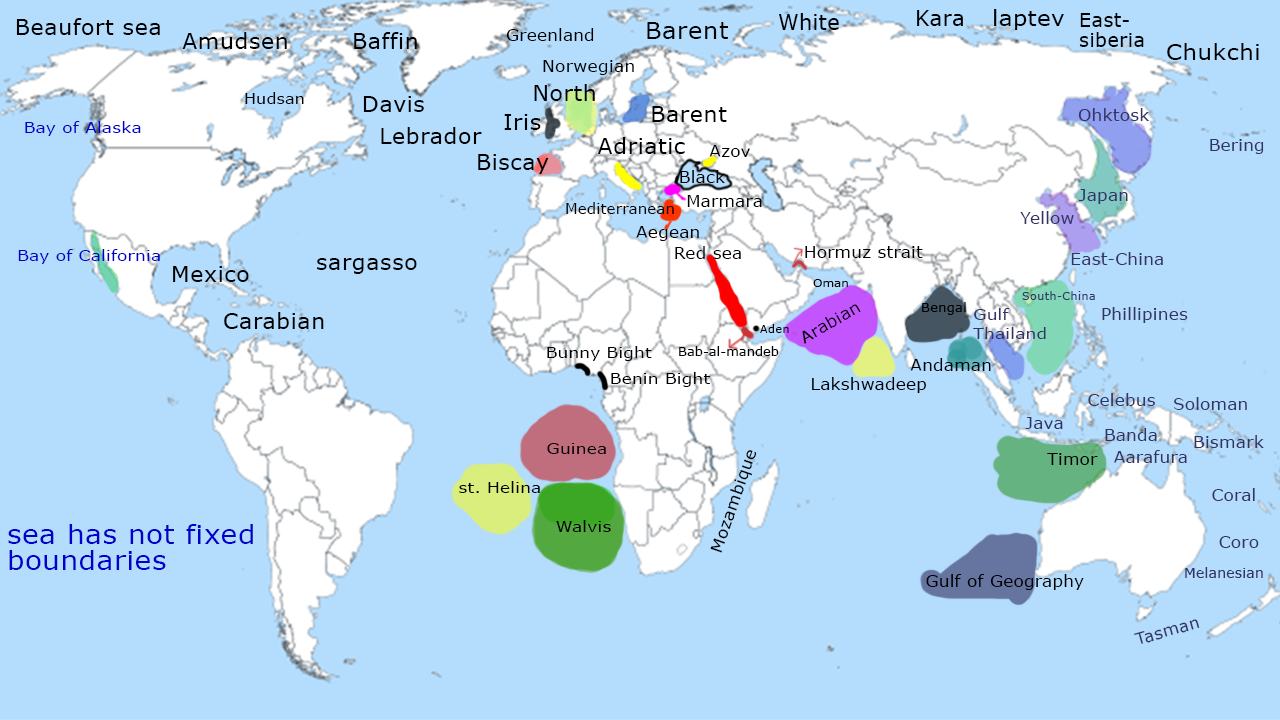
<style>
.page{position:relative;width:1280px;height:720px;background:#b4dcfc}
.page>*{position:absolute;margin:0}
.t1{font:20.6px "Verdana";letter-spacing:0.02em;color:#000000}
.t2{font:20.6px "Verdana";letter-spacing:0.02em;color:#000000;scale:1.03 1}
.t3{font:22.3px "Verdana";letter-spacing:0.02em;color:#000000}
.t4{font:18.9px/20.2px "Verdana";letter-spacing:0.02em;color:#000000}
.t5{font:21.6px "Verdana";letter-spacing:0.02em;color:#000000;scale:1.03 1}
.t6{font:16.3px "Verdana";letter-spacing:0.02em;color:#000000}
.t7{font:23.1px "Verdana";letter-spacing:0.02em;color:#000000;scale:1.05 1}
.t8{font:21.4px "Verdana";letter-spacing:0.02em;color:#000000;scale:1.08 1}
.t9{font:16.3px "Verdana";letter-spacing:0.02em;color:#000000;scale:1.04 1}
.t10{font:15.4px "Verdana";letter-spacing:0.02em;color:#000000}
.t11{font:16.2px "Verdana";letter-spacing:0.02em;color:#333366;scale:1.03 1}
.t12{font:14.6px "Verdana";letter-spacing:0.02em;color:#0000cc;scale:1.15 1}
.t13{font:16.2px "Verdana";letter-spacing:0.02em;color:#000000;scale:1.03 1}
.t14{font:14.6px "Verdana";letter-spacing:0.02em;color:#000000}
.t15{font:11.1px "Verdana";letter-spacing:0.02em;color:#000000;scale:1.05 1}
.t16{font:11.1px "Verdana";letter-spacing:0.02em;color:#333366}
.t17{font:12.9px "Verdana";letter-spacing:0.02em;color:#000000}
.t18{font:14.6px/18.8px "Verdana";letter-spacing:0.02em;color:#333366;scale:1.15 1}
.t19{font:11.1px "Verdana";letter-spacing:0.02em;color:#000000}
.t20{font:14.6px "Verdana";letter-spacing:0.02em;color:#000000;scale:1.15 1}
.t21{font:12px "Verdana";letter-spacing:0.02em;color:#000000;scale:1.05 1}
.t22{font:16.3px "Verdana";letter-spacing:0.02em;color:#333366;scale:1.03 1}
.t23{font:25.5px/25.8px "Verdana";letter-spacing:0.02em;color:#0000cc;scale:1.09 1}
.t24{font:13.7px "Verdana";letter-spacing:0.02em;color:#333366}
</style>
<div class="page">
<p class="t1" style="left:779px;top:13px;width:60px;height:17px">White</p>
<p class="t2" style="left:917px;top:10px;width:46px;height:16px">Kara</p>
<p class="t3" style="left:994px;top:9px;width:70px;height:21px">laptev</p>
<p class="t4" style="left:1079px;top:13px;width:65px;height:34px">East-<br>siberia</p>
<p class="t5" style="left:16px;top:18px;width:144px;height:17px">Beaufort sea</p>
<p class="t6" style="left:506px;top:28px;width:88px;height:13px">Greenland</p>
<p class="t7" style="left:647px;top:22px;width:81px;height:17px">Barent</p>
<p class="t5" style="left:182px;top:32px;width:105px;height:17px">Amudsen</p>
<p class="t5" style="left:354px;top:32px;width:63px;height:17px">Baffin</p>
<p class="t8" style="left:1167px;top:43px;width:92px;height:17px">Chukchi</p>
<p class="t9" style="left:543px;top:60px;width:91px;height:15px">Norwegian</p>
<p class="t5" style="left:534px;top:84px;width:61px;height:17px">North</p>
<p class="t10" style="left:245px;top:92px;width:59px;height:12px">Hudsan</p>
<p class="t5" style="left:363px;top:96px;width:61px;height:16px">Davis</p>
<p class="t5" style="left:652px;top:106px;width:75px;height:16px">Barent</p>
<p class="t11" style="left:1078px;top:108px;width:72px;height:13px">Ohktosk</p>
<p class="t12" style="left:25px;top:121px;width:116px;height:15px">Bay of Alaska</p>
<p class="t5" style="left:504px;top:114px;width:37px;height:16px">Iris</p>
<p class="t5" style="left:381px;top:127px;width:101px;height:17px">Lebrador</p>
<p class="t5" style="left:598px;top:137px;width:87px;height:17px">Adriatic</p>
<p class="t13" style="left:709px;top:145px;width:41px;height:12px">Azov</p>
<p class="t11" style="left:1210px;top:139px;width:54px;height:15px">Bering</p>
<p class="t5" style="left:478px;top:154px;width:71px;height:20px">Biscay</p>
<p class="t13" style="left:680px;top:170px;width:45px;height:13px">Black</p>
<p class="t13" style="left:687px;top:195px;width:75px;height:12px">Marmara</p>
<p class="t11" style="left:1079px;top:189px;width:49px;height:15px">Japan</p>
<p class="t14" style="left:566px;top:202px;width:108px;height:12px">Mediterranean</p>
<p class="t11" style="left:1020px;top:211px;width:54px;height:13px">Yellow</p>
<p class="t13" style="left:636px;top:226px;width:63px;height:15px">Aegean</p>
<p class="t13" style="left:675px;top:246px;width:66px;height:13px">Red sea</p>
<p class="t13" style="left:805px;top:246px;width:118px;height:12px">Hormuz strait</p>
<p class="t12" style="left:18px;top:249px;width:142px;height:15px">Bay of California</p>
<p class="t11" style="left:1071px;top:252px;width:92px;height:13px">East-China</p>
<p class="t5" style="left:173px;top:266px;width:76px;height:16px">Mexico</p>
<p class="t5" style="left:317px;top:258px;width:100px;height:16px">sargasso</p>
<p class="t15" style="left:813px;top:279px;width:35px;height:8px">Oman</p>
<p class="t16" style="left:1022px;top:291px;width:73px;height:9px">South-China</p>
<p class="t13" style="left:802px;top:304px;width:59px;height:40px;rotate:-30deg">Arabian</p>
<p class="t17" style="left:922px;top:302px;width:44px;height:13px">Bengal</p>
<p class="t5" style="left:224px;top:312px;width:100px;height:17px">Carabian</p>
<p class="t18" style="left:973px;top:308px;width:73px;height:31px">Gulf <br>Thailand</p>
<p class="t11" style="left:1102px;top:307px;width:86px;height:16px">Phillipines</p>
<p class="t19" style="left:760px;top:324px;width:29px;height:9px">Aden</p>
<p class="t20" style="left:547px;top:346px;width:105px;height:15px">Bunny Bight</p>
<p class="t21" style="left:679px;top:346px;width:100px;height:10px">Bab-al-mandeb</p>
<p class="t13" style="left:910px;top:358px;width:81px;height:13px">Andaman</p>
<p class="t20" style="left:611px;top:372px;width:99px;height:15px">Benin Bight</p>
<p class="t13" style="left:812px;top:377px;width:114px;height:16px">Lakshwadeep</p>
<p class="t11" style="left:1088px;top:393px;width:67px;height:13px">Celebus</p>
<p class="t11" style="left:1174px;top:397px;width:73px;height:13px">Soloman</p>
<p class="t11" style="left:1025px;top:417px;width:38px;height:12px">Java</p>
<p class="t11" style="left:1105px;top:428px;width:52px;height:13px">Banda</p>
<p class="t22" style="left:1194px;top:435px;width:70px;height:13px">Bismark</p>
<p class="t20" style="left:547px;top:443px;width:59px;height:11px">Guinea</p>
<p class="t13" style="left:710px;top:450px;width:47px;height:103px;rotate:-71deg">Mozambique</p>
<p class="t13" style="left:1047px;top:453px;width:51px;height:12px">Timor</p>
<p class="t11" style="left:1114px;top:450px;width:73px;height:13px">Aarafura</p>
<p class="t20" style="left:459px;top:481px;width:81px;height:12px">st. Helina</p>
<p class="t11" style="left:1212px;top:488px;width:43px;height:13px">Coral</p>
<p class="t20" style="left:556px;top:520px;width:55px;height:12px">Walvis</p>
<p class="t23" style="left:8px;top:524px;width:245px;height:46px">sea has not fixed <br>boundaries</p>
<p class="t11" style="left:1219px;top:536px;width:40px;height:12px">Coro</p>
<p class="t24" style="left:1185px;top:567px;width:78px;height:11px">Melanesian</p>
<p class="t13" style="left:926px;top:574px;width:158px;height:16px">Gulf of Geography</p>
<p class="t11" style="left:1134px;top:619px;width:66px;height:25px;rotate:-16deg">Tasman</p>
</div>
